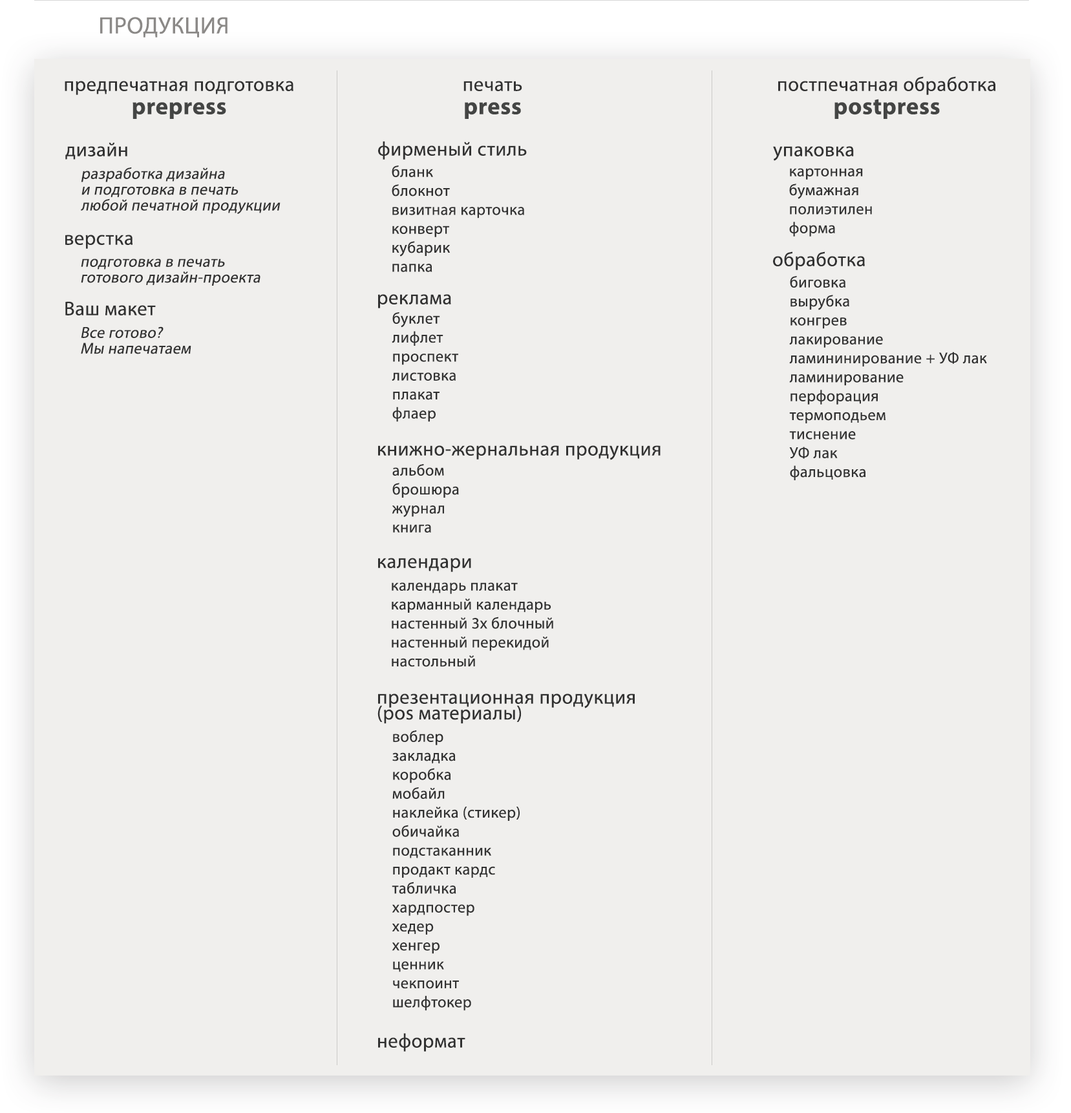
<style>
.page{position:relative;width:1071px;height:1113px;background:#f0efed}
.page>*{position:absolute;margin:0}
.t1{font:23.7px "MyriadPro-Regular";letter-spacing:0.02em;color:#8b8987}
.t2{font:19.8px "MyriadPro-Regular";letter-spacing:0.02em;color:#313131}
.t3{font:23.7px "MyriadPro-Bold";letter-spacing:0.02em;color:#444544}
.t4{font:15.8px/15.8px "MyriadPro-Regular";letter-spacing:0.02em;color:#313131;font-style:italic}
.t5{font:15.8px "MyriadPro-Regular";letter-spacing:0.02em;color:#313131}
.t6{font:19.8px/15.8px "MyriadPro-Regular";letter-spacing:0.02em;color:#313131}
</style>
<div class="page">
<p class="t1" style="left:100px;top:17px;width:128px;height:20px">ПРОДУКЦИЯ</p>
<p class="t2" style="left:778px;top:76px;width:218px;height:19px">постпечатная обработка</p>
<p class="t2" style="left:65px;top:81px;width:228px;height:14px">предпечатная подготовка</p>
<p class="t2" style="left:464px;top:81px;width:58px;height:10px">печать</p>
<p class="t3" style="left:835px;top:99px;width:105px;height:20px">postpress</p>
<p class="t3" style="left:133px;top:102px;width:93px;height:17px">prepress</p>
<p class="t3" style="left:465px;top:102px;width:56px;height:17px">press</p>
<p class="t2" style="left:65px;top:142px;width:62px;height:18px">дизайн</p>
<p class="t2" style="left:378px;top:141px;width:149px;height:19px">фирменый стиль</p>
<p class="t2" style="left:773px;top:146px;width:81px;height:15px">упаковка</p>
<p class="t4" style="left:81px;top:167px;width:200px;height:47px">разработка дизайна<br>и подготовка в печать<br>любой печатной продукции</p>
<p class="t5" style="left:392px;top:165px;width:132px;height:107px">бланк<br>блокнот<br>визитная карточка<br>конверт<br>кубарик<br>папка</p>
<p class="t5" style="left:789px;top:168px;width:83px;height:69px">картонная<br>бумажная<br>полиэтилен<br>форма</p>
<p class="t2" style="left:65px;top:235px;width:68px;height:14px">верстка</p>
<p class="t2" style="left:773px;top:251px;width:92px;height:19px">обработка</p>
<p class="t4" style="left:81px;top:259px;width:180px;height:27px">подготовка в печать<br>готового дизайн-проекта</p>
<p class="t5" style="left:789px;top:276px;width:198px;height:204px">биговка<br>вырубка<br>конгрев<br>лакирование<br>ламининирование + УФ лак<br>ламинирование<br>перфорация<br>термоподьем<br>тиснение<br>УФ лак<br>фальцовка</p>
<p class="t2" style="left:65px;top:301px;width:91px;height:14px">Ваш макет</p>
<p class="t2" style="left:378px;top:294px;width:73px;height:14px">реклама</p>
<p class="t5" style="left:392px;top:312px;width:66px;height:110px">буклет<br>лифлет<br>проспект<br>листовка<br>плакат<br>флаер</p>
<p class="t4" style="left:81px;top:326px;width:110px;height:28px">Все готово?<br>Мы напечатаем</p>
<p class="t2" style="left:378px;top:445px;width:283px;height:15px">книжно-жернальная продукция</p>
<p class="t5" style="left:392px;top:464px;width:67px;height:69px">альбом<br>брошюра<br>журнал<br>книга</p>
<p class="t2" style="left:378px;top:558px;width:93px;height:14px">календари</p>
<p class="t5" style="left:392px;top:582px;width:161px;height:85px">календарь плакат<br>карманный календарь<br>настенный 3х блочный<br>настенный перекидой<br>настольный</p>
<p class="t6" style="left:378px;top:694px;width:257px;height:30px">презентационная продукция<br>(pos материалы)</p>
<p class="t5" style="left:392px;top:730px;width:128px;height:281px">воблер<br>закладка<br>коробка<br>мобайл<br>наклейка (стикер)<br>обичайка<br>подстаканник<br>продакт кардс<br>табличка<br>хардпостер<br>хедер<br>хенгер<br>ценник<br>чекпоинт<br>шелфтокер</p>
<p class="t2" style="left:378px;top:1033px;width:87px;height:19px">неформат</p>
</div>
